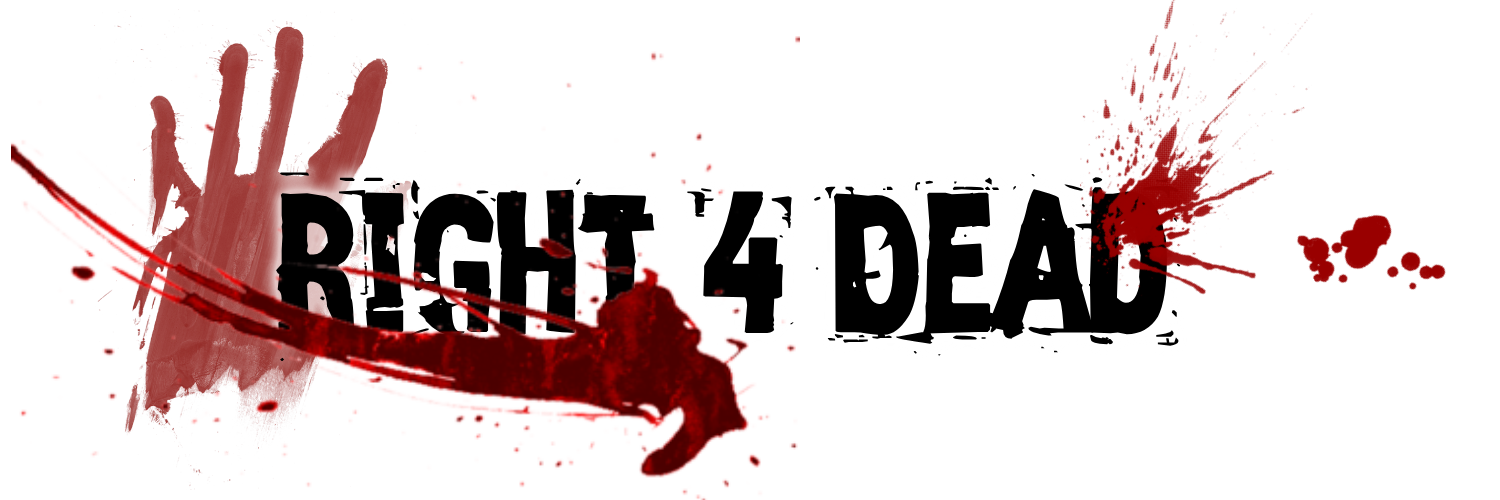
<style>
.page{position:relative;width:1500px;height:500px;background:#ffffff}
.page>*{position:absolute;margin:0}
.t1{font:163px "Zero&Zero-Is";color:#000000}
</style>
<div class="page">
<p class="t1" style="left:276px;top:172px;width:904px;height:190px">Right 4 Dead</p>
</div>
